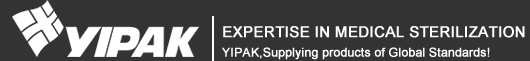
<style>
.page{position:relative;width:530px;height:61px;background:#333333}
.page>*{position:absolute;margin:0}
.t1{font:12px/22px "ArialMT";color:#ffffff;font-weight:bold}
.t2{font:15px/22px "ArialMT";color:#ffffff;font-weight:bold}
</style>
<div class="page">
<p class="t1" style="left:222px;top:26px;width:303px;height:34px"><span class="t2">EXPERTISE IN MEDICAL STERILIZATION<br></span>YIPAK,Supplying products of Global Standards!</p>
</div>
